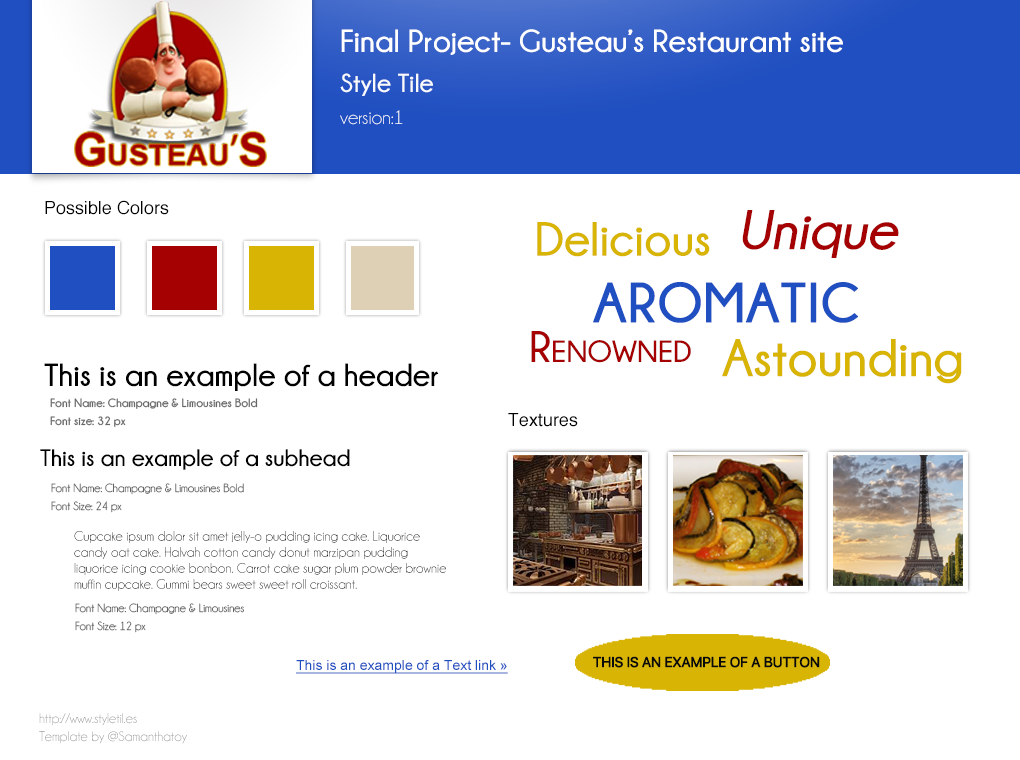
<style>
.page{position:relative;width:1020px;height:760px;background:#ffffff}
.page>*{position:absolute;margin:0}
.t1{font:32px "Champagne&Limousines-Bold";color:#ffffff}
.t2{font:26px "Champagne&Limousines-Bold";color:#f8fafc}
.t3{font:20px "Champagne&Limousines";color:#f8fafc}
.t4{font:18px "Helvetica";color:#000000}
.t5{font:48px "Champagne&Limousines-Bold";color:#d8b405}
.t6{font:56px "Champagne&Limousines-Bold";color:#a50102;font-style:italic}
.t7{font:56px "Champagne&Limousines-Bold";color:#204fc1;text-transform:uppercase;font-weight:bold}
.t8{font:44px "Champagne&Limousines-Bold";color:#a50102;font-variant:small-caps}
.t9{font:53px "Champagne&Limousines-Bold";color:#d8b405}
.t10{font:32px "Champagne&Limousines-Bold";color:#000000}
.t11{font:12px/18px "Champagne&Limousines-Bold";color:#666666}
.t12{font:24px "Champagne&Limousines-Bold";color:#000000}
.t13{font:12px/18px "Champagne&Limousines";color:#666666}
.t14{font:14px/16px "Champagne&Limousines"}
.t15{font:14px "ArialMT";color:#204fc1;text-decoration:underline}
.t16{font:14px "SFUIDisplay-Regular";color:#0a0a0a;font-weight:bold}
.t17{font:14px/18px "Champagne&Limousines";color:#999999}
</style>
<div class="page">
<p class="t1" style="left:341px;top:29px;width:502px;height:26px">Final Project- Gusteau’s Restaurant site</p>
<p class="t2" style="left:340px;top:73px;width:93px;height:23px">Style Tile</p>
<p class="t3" style="left:340px;top:110px;width:63px;height:15px">version:1</p>
<p class="t4" style="left:45px;top:200px;width:124px;height:15px">Possible Colors</p>
<p class="t5" style="left:537px;top:222px;width:173px;height:35px">Delicious</p>
<p class="t6" style="left:742px;top:210px;width:157px;height:48px">Unique</p>
<p class="t7" style="left:593px;top:282px;width:265px;height:41px">Aromatic</p>
<p class="t8" style="left:531px;top:331px;width:160px;height:32px">Renowned</p>
<p class="t9" style="left:722px;top:339px;width:240px;height:45px">Astounding</p>
<p class="t10" style="left:44px;top:363px;width:395px;height:28px">This is an example of a header</p>
<p class="t11" style="left:50px;top:398px;width:208px;height:29px">Font Name: Champagne &amp; Limousines Bold<br>Font size: 32 px</p>
<p class="t4" style="left:508px;top:413px;width:70px;height:14px">Textures</p>
<p class="t12" style="left:40px;top:449px;width:310px;height:21px">This is an example of a subhead</p>
<p class="t13" style="left:51px;top:483px;width:193px;height:30px">Font Name: Champagne &amp; Limousines Bold<br>Font Size: 24 px</p>
<p class="t14" style="left:74px;top:531px;width:372px;height:60px">Cupcake ipsum dolor sit amet jelly-o pudding icing cake. Liquorice candy oat cake. Halvah cotton candy donut marzipan pudding liquorice icing cookie bonbon. Carrot cake sugar plum powder brownie muffin cupcake. Gummi bears sweet sweet roll croissant.</p>
<p class="t13" style="left:75px;top:603px;width:169px;height:30px">Font Name: Champagne &amp; Limousines<br>Font Size: 12 px</p>
<p class="t15" style="left:296px;top:660px;width:212px;height:14px">This is an example of a Text link »</p>
<p class="t16" style="left:593px;top:656px;width:227px;height:12px">THIS IS AN EXAMPLE OF A BUTTON</p>
<p class="t17" style="left:39px;top:713px;width:148px;height:31px">http://www.styletil.es<br>Template by @Samanthatoy</p>
</div>
